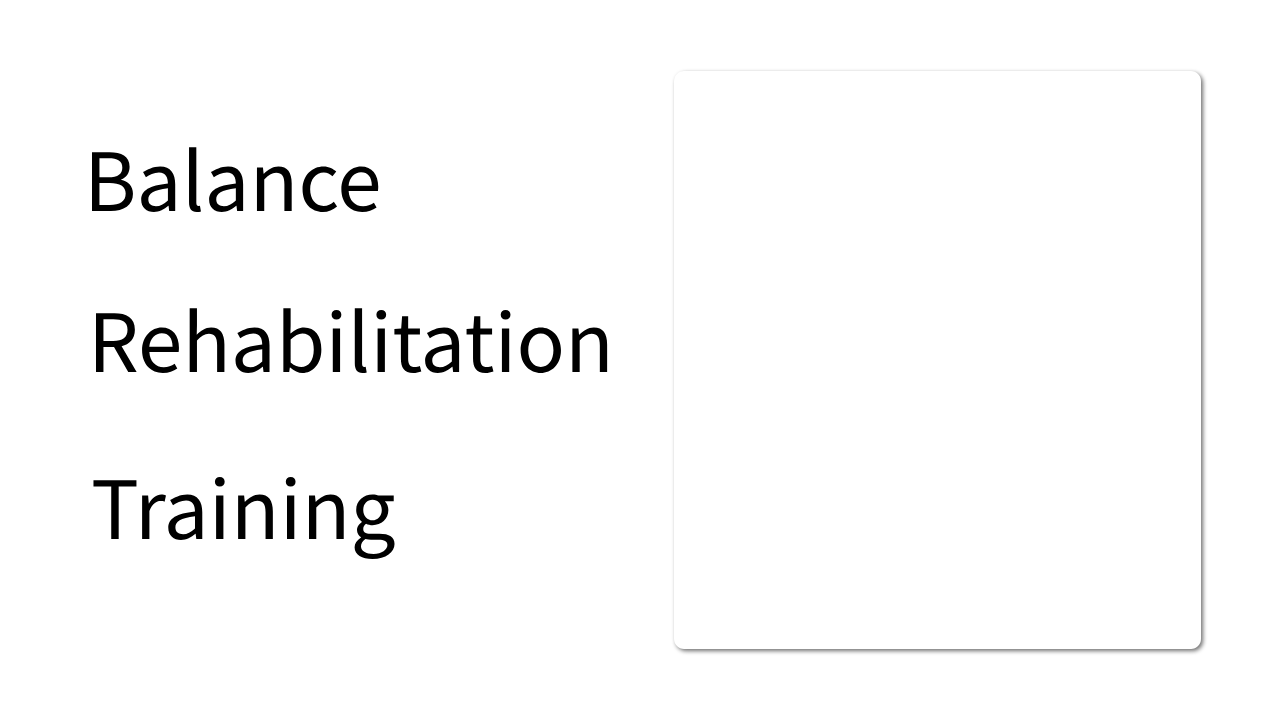
<style>
.page{position:relative;width:1280px;height:720px;background:#ffffff}
.page>*{position:absolute;margin:0}
.t1{font:80px "NotoSansKR-Regular";color:#000000}
</style>
<div class="page">
<p class="t1" style="left:92px;top:147px;width:287px;height:66px">Balance</p>
<p class="t1" style="left:96px;top:308px;width:512px;height:66px">Rehabilitation</p>
<p class="t1" style="left:93px;top:477px;width:302px;height:82px">Training</p>
</div>
